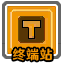
<style>
.page{position:relative;width:64px;height:64px;background:#ffffff}
.page>*{position:absolute;margin:0}
.t1{font:13px "HYWenHei-HEW";letter-spacing:0.045em;color:#f19602}
</style>
<div class="page">
<p class="t1" style="left:13px;top:48px;width:39px;height:13px">终端站</p>
</div>
